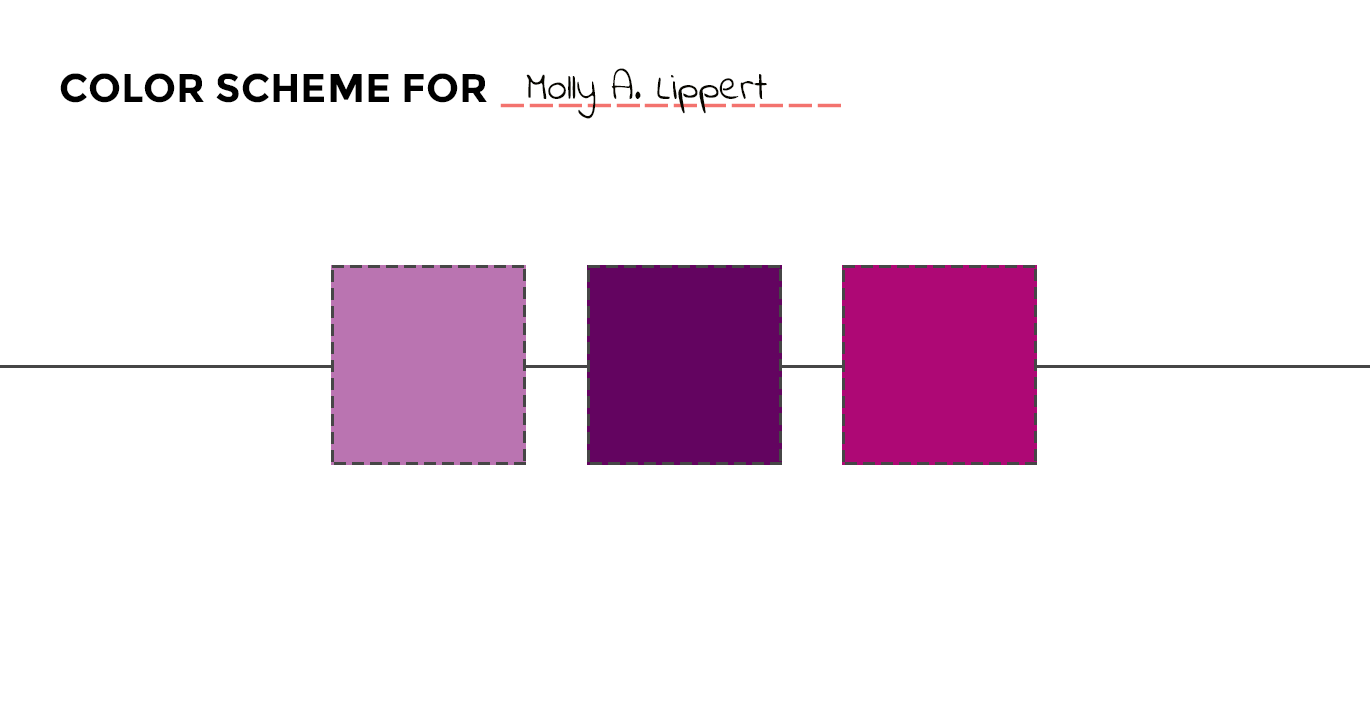
<style>
.page{position:relative;width:1370px;height:712px;background:#ffffff}
.page>*{position:absolute;margin:0}
.t1{font:40px "Montserrat-Bold";color:#000000;text-transform:uppercase}
.t2{font:40px "Montserrat-Bold";color:#f3736e;text-transform:uppercase}
.t3{font:30px "IndieFlower";color:#080600}
</style>
<div class="page">
<p class="t1" style="left:60px;top:73px;width:781px;height:35px">Color Scheme for <span class="t2">____________</span></p>
<p class="t3" style="left:526px;top:68px;width:241px;height:51px">Molly A. Lippert</p>
</div>
